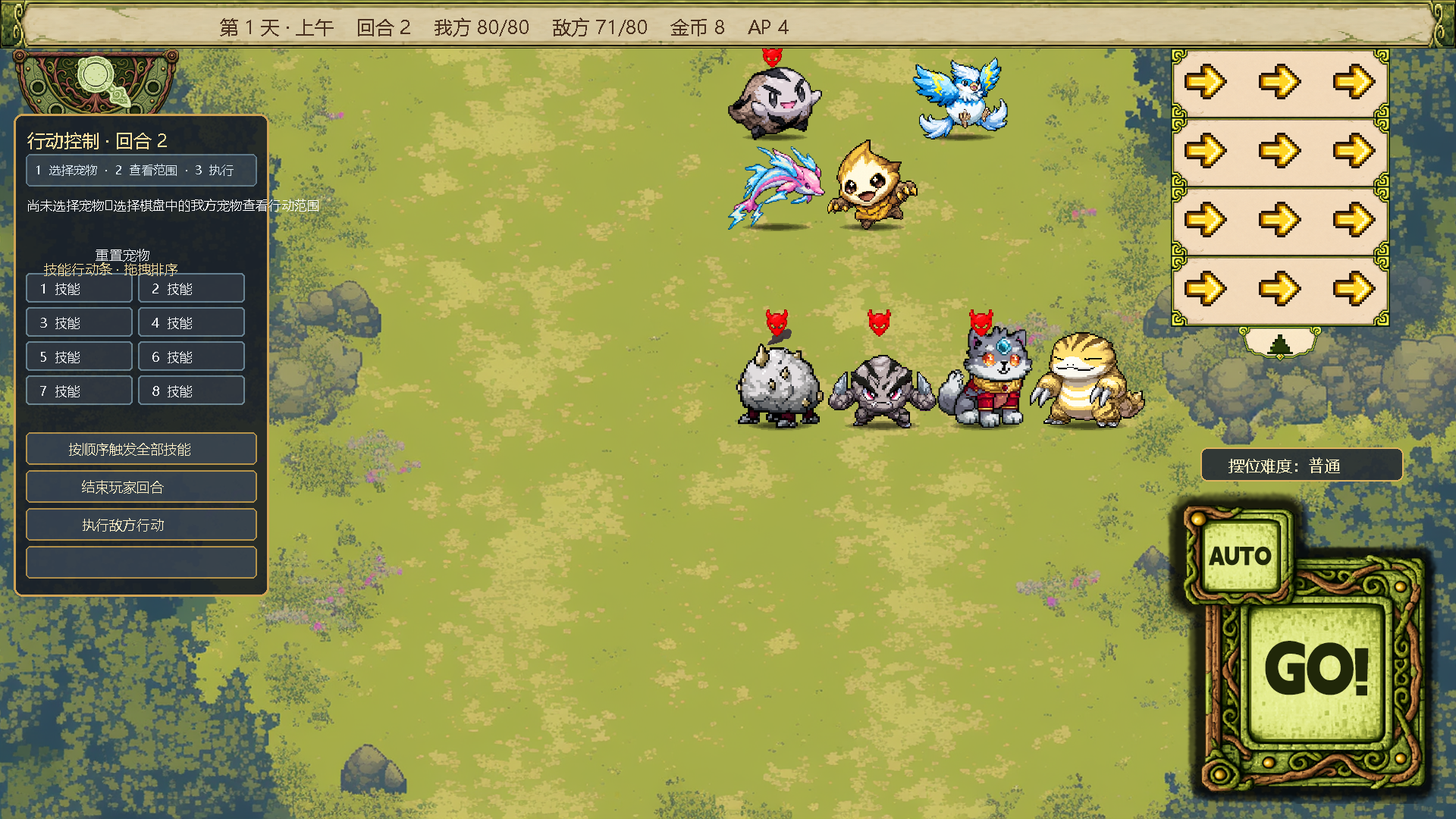
<style>
.page{position:relative;width:1456px;height:819px}
.page>*{position:absolute;margin:0}
.t1{font:19px "MicrosoftYaHei";color:#49301f}
.t2{font:18.2px "MicrosoftYaHei";color:#ffe2a0}
.t3{font:12.1px "MicrosoftYaHei";color:#dceaf3}
.t4{font:12.9px "MicrosoftYaHei";color:#ffffff}
.t5{font:13.6px "MicrosoftYaHei";color:#f4f6f8}
.t6{font:13.6px "MicrosoftYaHei";color:#ffe2a0}
.t7{font:12.9px "MicrosoftYaHei";color:#f4f6f8}
.t8{font:13.6px "MicrosoftYaHei";color:#fff0c6}
.t9{font:15.9px "MicrosoftYaHei";color:#fff3c4}
</style>
<div class="page">
<p class="t1" style="left:220px;top:17px;width:569px;height:20px">第 1 天 · 上午    回合 2    我方 80/80    敌方 71/80    金币 8    AP 4</p>
<p class="t2" style="left:27px;top:132px;width:140px;height:17px">行动控制 · 回合 2</p>
<p class="t3" style="left:36px;top:164px;width:198px;height:12px">1  选择宠物  ·  2  查看范围  ·  3  执行</p>
<p class="t4" style="left:28px;top:199px;width:290px;height:13px">尚未选择宠物<br>选择棋盘中的我方宠物查看行动范围</p>
<p class="t5" style="left:96px;top:249px;width:53px;height:13px">重置宠物</p>
<p class="t6" style="left:44px;top:262px;width:133px;height:14px">技能行动条 · 拖拽排序</p>
<p class="t7" style="left:41px;top:283px;width:39px;height:12px">1  技能</p>
<p class="t7" style="left:152px;top:283px;width:40px;height:12px">2  技能</p>
<p class="t7" style="left:40px;top:317px;width:40px;height:12px">3  技能</p>
<p class="t7" style="left:152px;top:317px;width:40px;height:12px">4  技能</p>
<p class="t7" style="left:41px;top:351px;width:39px;height:12px">5  技能</p>
<p class="t7" style="left:152px;top:351px;width:40px;height:12px">6  技能</p>
<p class="t7" style="left:40px;top:385px;width:40px;height:12px">7  技能</p>
<p class="t7" style="left:152px;top:385px;width:40px;height:12px">8  技能</p>
<p class="t8" style="left:69px;top:443px;width:121px;height:13px">按顺序触发全部技能</p>
<p class="t9" style="left:1228px;top:457px;width:112px;height:17px">摆位难度：普通</p>
<p class="t8" style="left:82px;top:480px;width:82px;height:14px">结束玩家回合</p>
<p class="t8" style="left:83px;top:518px;width:81px;height:14px">执行敌方行动</p>
</div>
